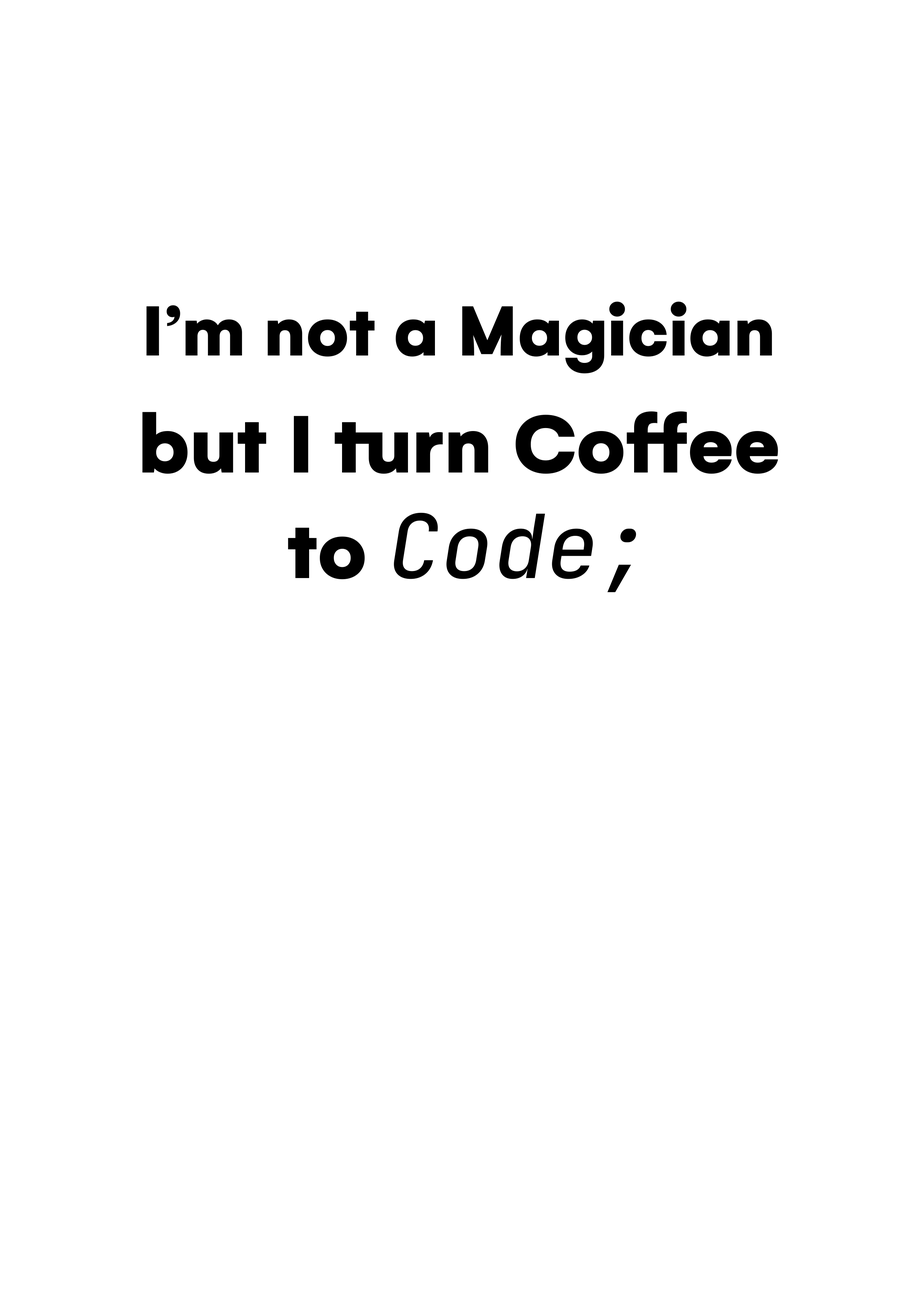
<style>
.page{position:relative;width:918px;height:1299px;background:#ffffff}
.page>*{position:absolute;margin:0}
.t1{font:76.7px "Gelion-Black";color:#000000}
.t2{font:88px "Gelion-Black";color:#000000}
.t3{font:88px "JetBrainsMono-MediumItalic";color:#000000}
</style>
<div class="page">
<p class="t1" style="left:146px;top:301px;width:626px;height:73px">I’m not a Magician</p>
<p class="t2" style="left:142px;top:411px;width:636px;height:181px;text-align:center">but I turn Coffee<br> to <span class="t3">Code;</span></p>
</div>
